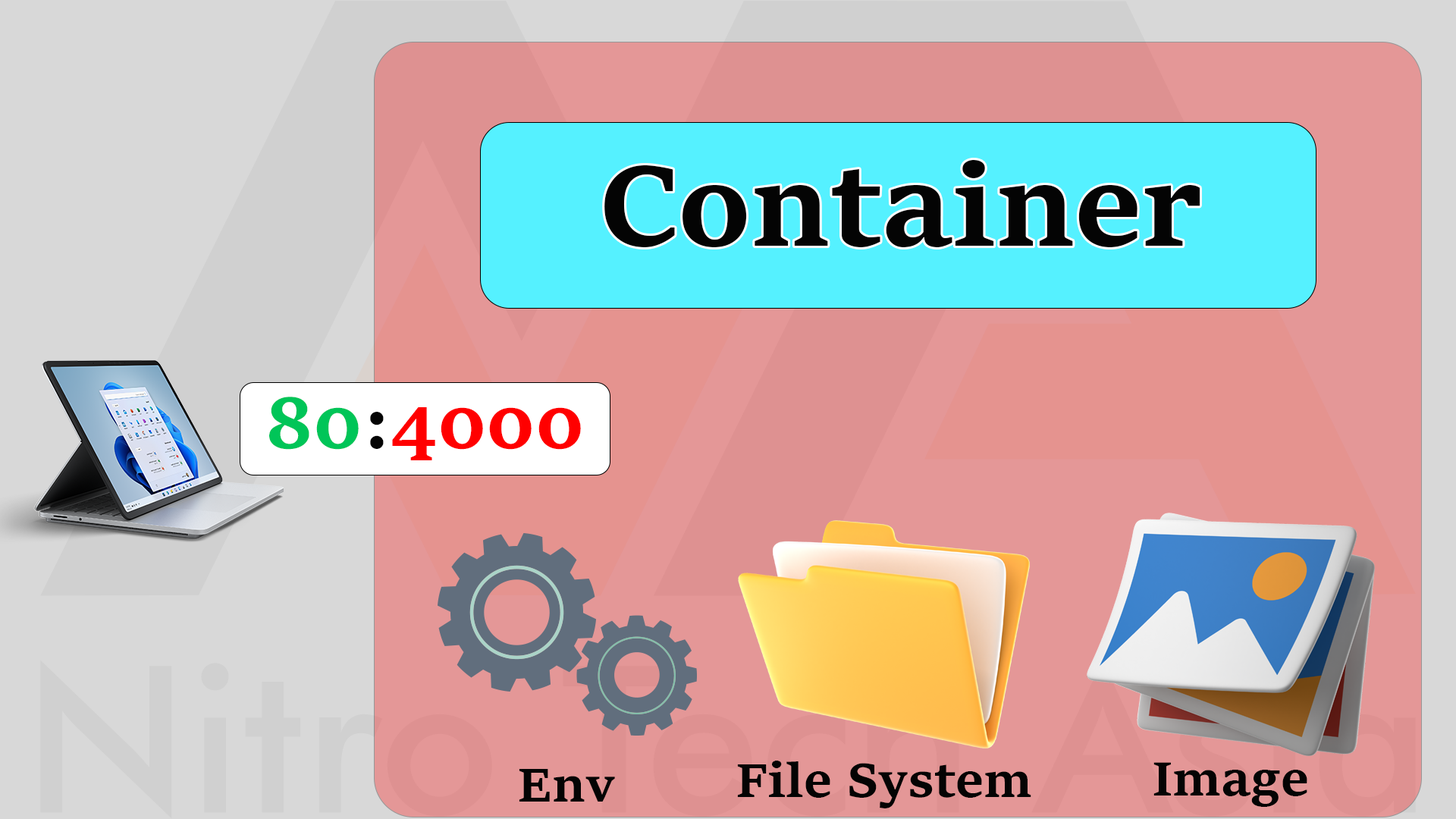
<style>
.page{position:relative;width:1456px;height:819px}
.page>*{position:absolute;margin:0}
.t1{font:123.2px "Sitka-TextBold";color:#040404}
.t2{font:75.8px "Sitka-TextBold";color:#ff0000}
.t3{font:75.8px "Sitka-TextBold";color:#00c558}
.t4{font:75.8px "Sitka-TextBold";color:#040404}
.t5{font:51.8px "Sitka-TextBold";color:#040404}
</style>
<div class="page">
<p class="t1" style="left:604px;top:160px;width:596px;height:87px">Container</p>
<p class="t2" style="left:269px;top:397px;width:312px;height:63px"><span class="t3">80</span><span class="t4">:</span>4000</p>
<p class="t5" style="left:737px;top:761px;width:294px;height:47px">File System</p>
<p class="t5" style="left:519px;top:769px;width:96px;height:33px">Env</p>
<p class="t5" style="left:1153px;top:762px;width:154px;height:45px">Image</p>
</div>
